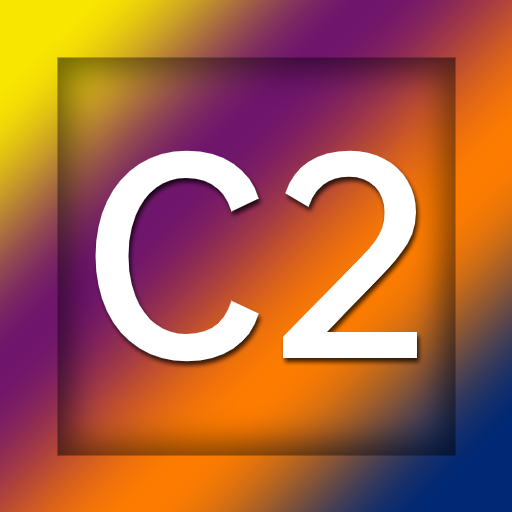
<style>
.page{position:relative;width:512px;height:512px}
.page>*{position:absolute;margin:0}
.t1{font:250px "OPPOSans-B";color:#ffffff}
</style>
<div class="page">
<p class="t1" style="left:95px;top:150px;width:322px;height:212px">C2</p>
</div>
